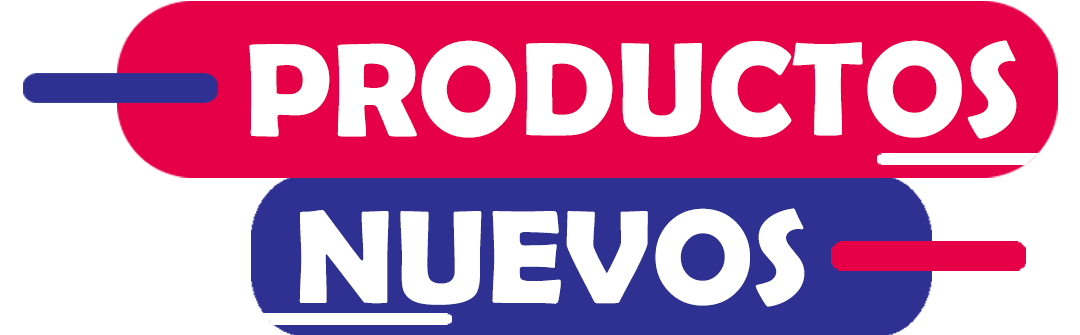
<style>
.page{position:relative;width:1080px;height:335px;background:#ffffff}
.page>*{position:absolute;margin:0}
.t1{font:133.9px "BerlinSansFBDemi-Bold";color:#ffffff}
.t2{font:133.8px "BerlinSansFBDemi-Bold";color:#ffffff}
</style>
<div class="page">
<p class="t1" style="left:249px;top:40px;width:768px;height:99px">PRODUCTOS</p>
<p class="t2" style="left:299px;top:208px;width:506px;height:99px">NUEVOS</p>
</div>
